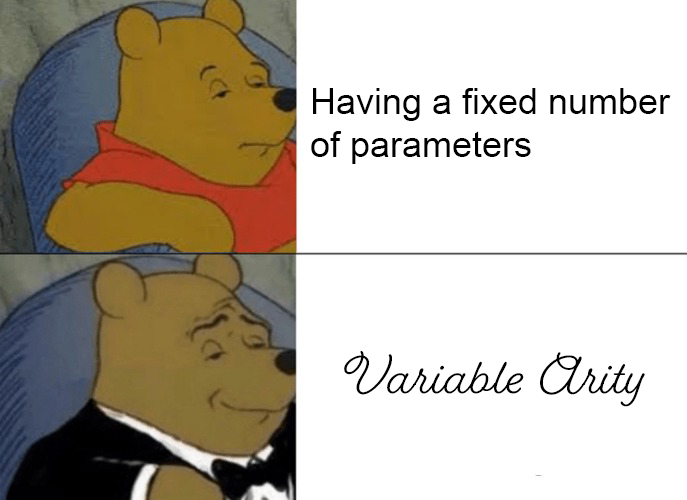
<style>
.page{position:relative;width:687px;height:500px;background:#ffffff}
.page>*{position:absolute;margin:0}
.t1{font:36px "ArialMT";color:#000000}
.t2{font:48px "FairwaterScript-Regular";color:#000000}
</style>
<div class="page">
<p class="t1" style="left:311px;top:88px;width:360px;height:76px">Having a fixed number <br>of parameters</p>
<p class="t2" style="left:344px;top:351px;width:301px;height:56px">Variable Arity</p>
</div>
